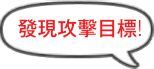
<style>
.page{position:relative;width:154px;height:69px;background:#ffffff}
.page>*{position:absolute;margin:0}
.t1{font:20px "GothicMB101Pr6N-Medium";color:#ef2021}
.t2{font:20px "GothicMB101Pr6N-Light";color:#ef2021}
</style>
<div class="page">
<p class="t1" style="left:18px;top:18px;width:123px;height:20px">發現攻擊目標<span class="t2">!</span></p>
</div>
